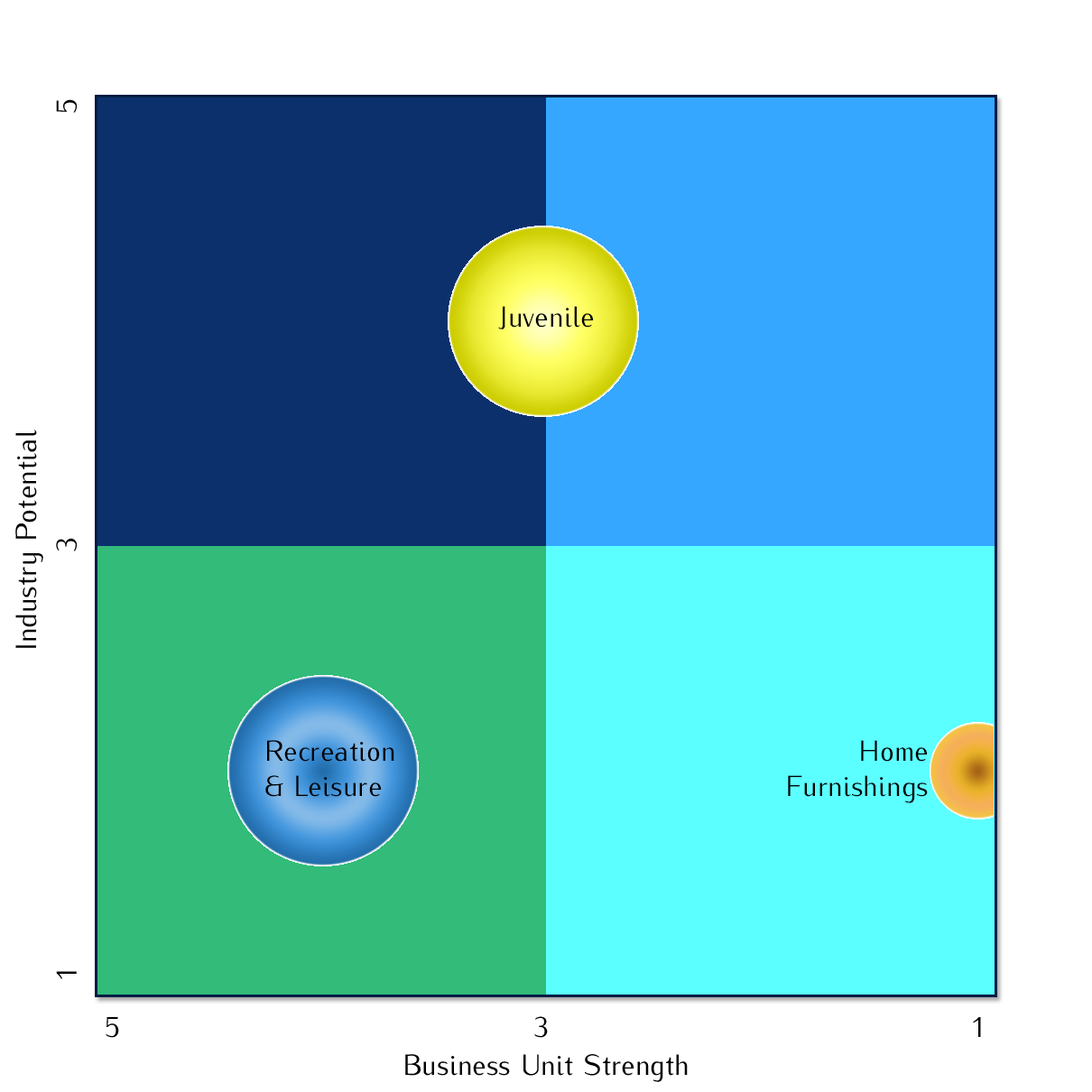
<style>
.page{position:relative;width:1092px;height:1092px;background:#ffffff}
.page>*{position:absolute;margin:0}
.t1{font:28.9px "Iwona-Regular";color:#000000}
</style>
<div class="page">
<p class="t1" style="left:56px;top:99px;width:21px;height:880px;rotate:-90deg">1                                           3                                            5</p>
<p class="t1" style="left:498px;top:306px;width:96px;height:23px">Juvenile</p>
<p class="t1" style="left:15px;top:430px;width:28px;height:218px;rotate:-90deg">Industry Potential</p>
<p class="t1" style="left:265px;top:740px;width:129px;height:57px">Recreation<br>&amp; Leisure</p>
<p class="t1" style="left:788px;top:740px;width:140px;height:63px;text-align:right">Home <br>Furnishings</p>
<p class="t1" style="left:106px;top:1016px;width:875px;height:22px">5                                           3                                            1</p>
<p class="t1" style="left:405px;top:1054px;width:283px;height:28px">Business Unit Strength</p>
</div>
